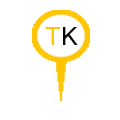
<style>
.page{position:relative;width:120px;height:120px;background:#ffffff}
.page>*{position:absolute;margin:0}
.t1{font:25px "ArialMT";color:#ffc600}
.t2{font:25px "ArialMT";color:#040404}
</style>
<div class="page">
<p class="t1" style="left:45px;top:27px;width:15px;height:18px">T</p>
<p class="t2" style="left:63px;top:27px;width:15px;height:18px">K</p>
</div>
